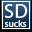
<style>
.page{position:relative;width:32px;height:32px}
.page>*{position:absolute;margin:0}
.t1{font:20.2px "MyriadPro-Regular";color:#ffffff}
.t2{font:9.2px "MyriadPro-Regular";color:#ffffff;scale:1.03 1}
</style>
<div class="page">
<p class="t1" style="left:4px;top:4px;width:24px;height:14px">SD</p>
<p class="t2" style="left:4px;top:20px;width:23px;height:7px">sucks</p>
</div>
